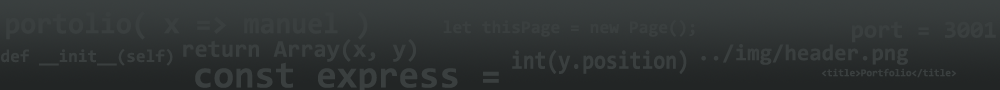
<style>
.page{position:relative;width:1000px;height:90px}
.page>*{position:absolute;margin:0}
.t1{font:29.9px "Consolas-Bold";color:#3a3f3f;scale:0.97 1}
.t2{font:17.8px "Consolas-Bold";color:#3a3f3f}
.t3{font:24.2px "Consolas-Bold";color:#3a3f3f}
.t4{font:24px "Consolas-Bold";color:#3a3f3f}
.t5{font:17.6px "Consolas-Bold";color:#3a3f3f}
.t6{font:25.6px "Consolas-Bold";color:#3a3f3f;scale:0.84 1}
.t7{font:22.6px "Consolas-Bold";color:#3a3f3f}
.t8{font:10.2px "Consolas-Bold";color:#3a3f3f}
</style>
<div class="page">
<p class="t1" style="left:6px;top:11px;width:362px;height:29px">portolio( x =&gt; manuel )</p>
<p class="t2" style="left:443px;top:19px;width:252px;height:18px">let thisPage = new Page();</p>
<p class="t3" style="left:852px;top:21px;width:144px;height:22px">port = 3001</p>
<p class="t4" style="left:183px;top:39px;width:233px;height:23px">return Array(x, y)</p>
<p class="t5" style="left:1px;top:49px;width:172px;height:17px">def __init__(self)</p>
<p class="t6" style="left:512px;top:49px;width:175px;height:25px">int(y.position)</p>
<p class="t7" style="left:701px;top:44px;width:207px;height:21px">../img/header.png</p>
<p class="t8" style="left:821px;top:68px;width:136px;height:10px">&lt;title&gt;Portfolio&lt;/title&gt;</p>
</div>
